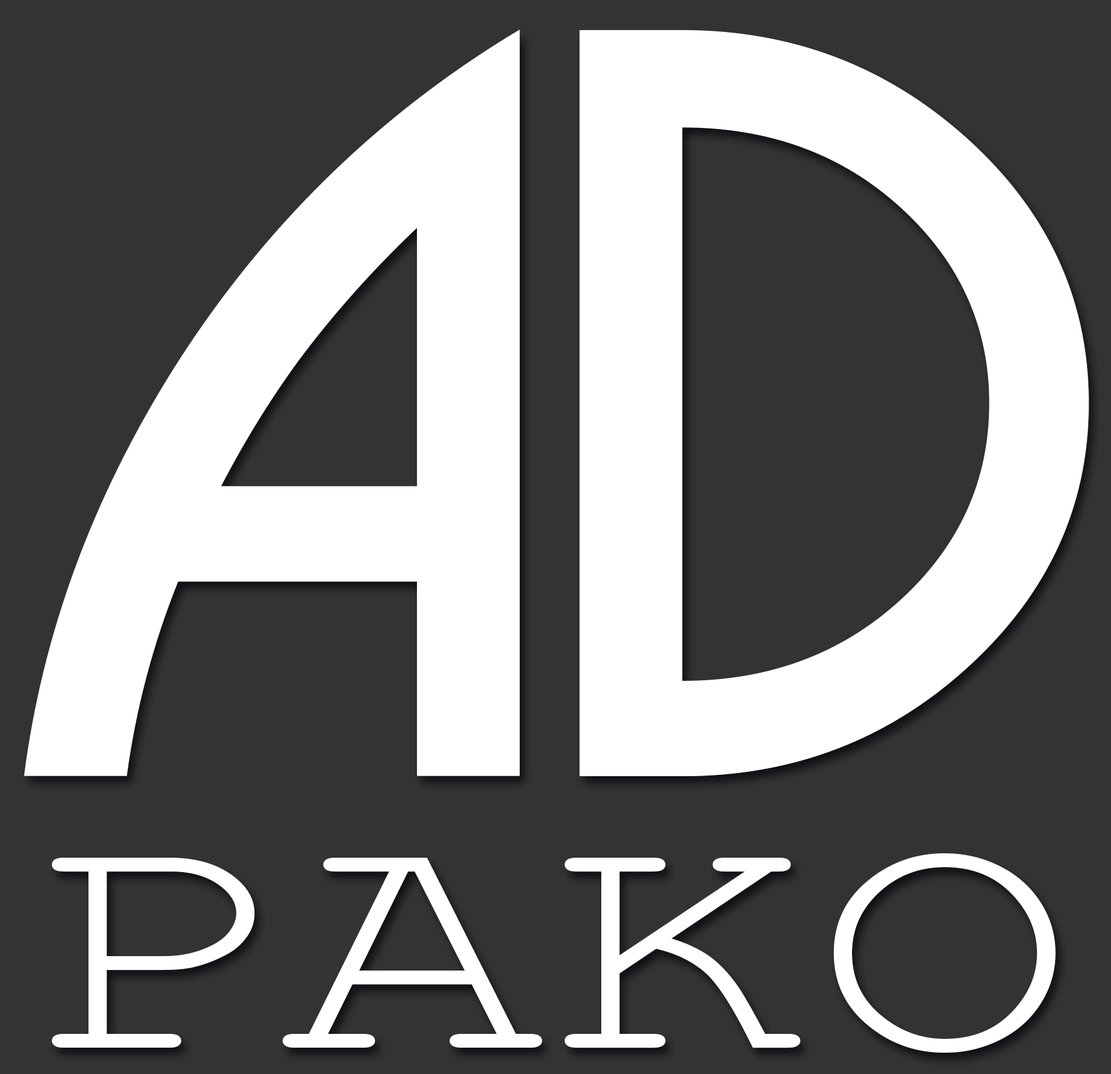
<style>
.page{position:relative;width:1111px;height:1074px;background:#333333}
.page>*{position:absolute;margin:0}
.t1{font:994.8px "Bosanova";color:#ffffff;scale:1.05 1}
.t2{font:332.4px "CourierNewPSMT";color:#ffffff;scale:1.33 1}
</style>
<div class="page">
<p class="t1" style="left:24px;top:29px;width:1065px;height:747px">AD</p>
<p class="t2" style="left:51px;top:853px;width:1004px;height:199px">PAKO</p>
</div>
